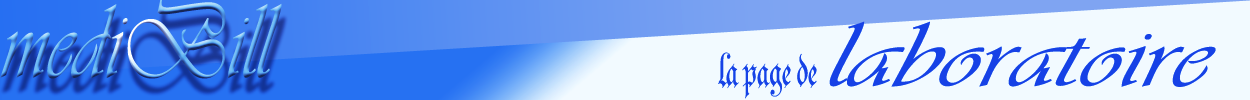
<style>
.page{position:relative;width:1250px;height:100px;background:#f2faff}
.page>*{position:absolute;margin:0}
.t1{font:110.1px "Vivaldii";scale:0.78 1}
.t2{font:96.1px "Vivaldii";color:#1e4ed0;scale:1.27 1}
.t3{font:80.6px "Parchment-Regular";color:#1e4ed0;scale:0.73 1}
</style>
<div class="page">
<p class="t1" style="left:0px;top:0px;width:282px;height:79px">mediBill</p>
<p class="t2" style="left:829px;top:21px;width:387px;height:66px">laboratoire</p>
<p class="t3" style="left:718px;top:52px;width:99px;height:47px">la page de</p>
</div>
